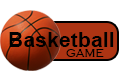
<style>
.page{position:relative;width:120px;height:80px;background:#ffffff}
.page>*{position:absolute;margin:0}
.t1{font:21.3px "Arial-BoldMT";color:#000000}
.t2{font:14.2px "CopperplateGothic-Light";color:#000000}
</style>
<div class="page">
<p class="t1" style="left:9px;top:32px;width:105px;height:15px">Basketball</p>
<p class="t2" style="left:66px;top:49px;width:38px;height:8px">game</p>
</div>
